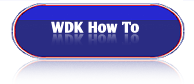
<style>
.page{position:relative;width:194px;height:84px;background:#ffffff}
.page>*{position:absolute;margin:0}
.t1{font:15px "OliJo-Bold";color:#ffffff}
</style>
<div class="page">
<p class="t1" style="left:51px;top:21px;width:88px;height:12px">WDK How To</p>
</div>
